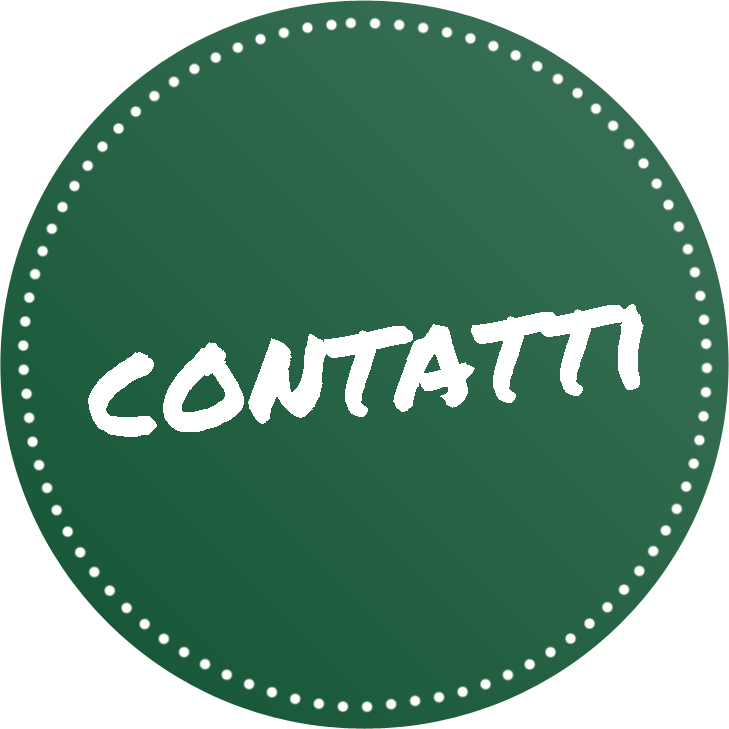
<style>
.page{position:relative;width:729px;height:729px;background:#ffffff}
.page>*{position:absolute;margin:0}
.t1{font:140px "PermanentMarker";color:#ffffff}
</style>
<div class="page">
<p class="t1" style="left:88px;top:304px;width:556px;height:133px;rotate:-5deg">contatti</p>
</div>
